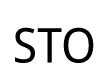
<style>
.page{position:relative;width:105px;height:83px;background:#ffffff}
.page>*{position:absolute;margin:0}
.t1{font:47.9px "DroidSans";color:#000000}
</style>
<div class="page">
<p class="t1" style="left:15px;top:27px;width:79px;height:36px">STO</p>
</div>
